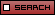
<style>
.page{position:relative;width:55px;height:15px;background:#000000}
.page>*{position:absolute;margin:0}
.t1{font:8px "BitDustTwo";color:#000000}
</style>
<div class="page">
<p class="t1" style="left:15px;top:5px;width:35px;height:5px">SEARCH</p>
</div>
